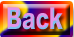
<style>
.page{position:relative;width:74px;height:37px}
.page>*{position:absolute;margin:0}
.t1{font:30.4px "Arial-Black";scale:0.68 1}
</style>
<div class="page">
<p class="t1" style="left:7px;top:7px;width:56px;height:23px">Back</p>
</div>
